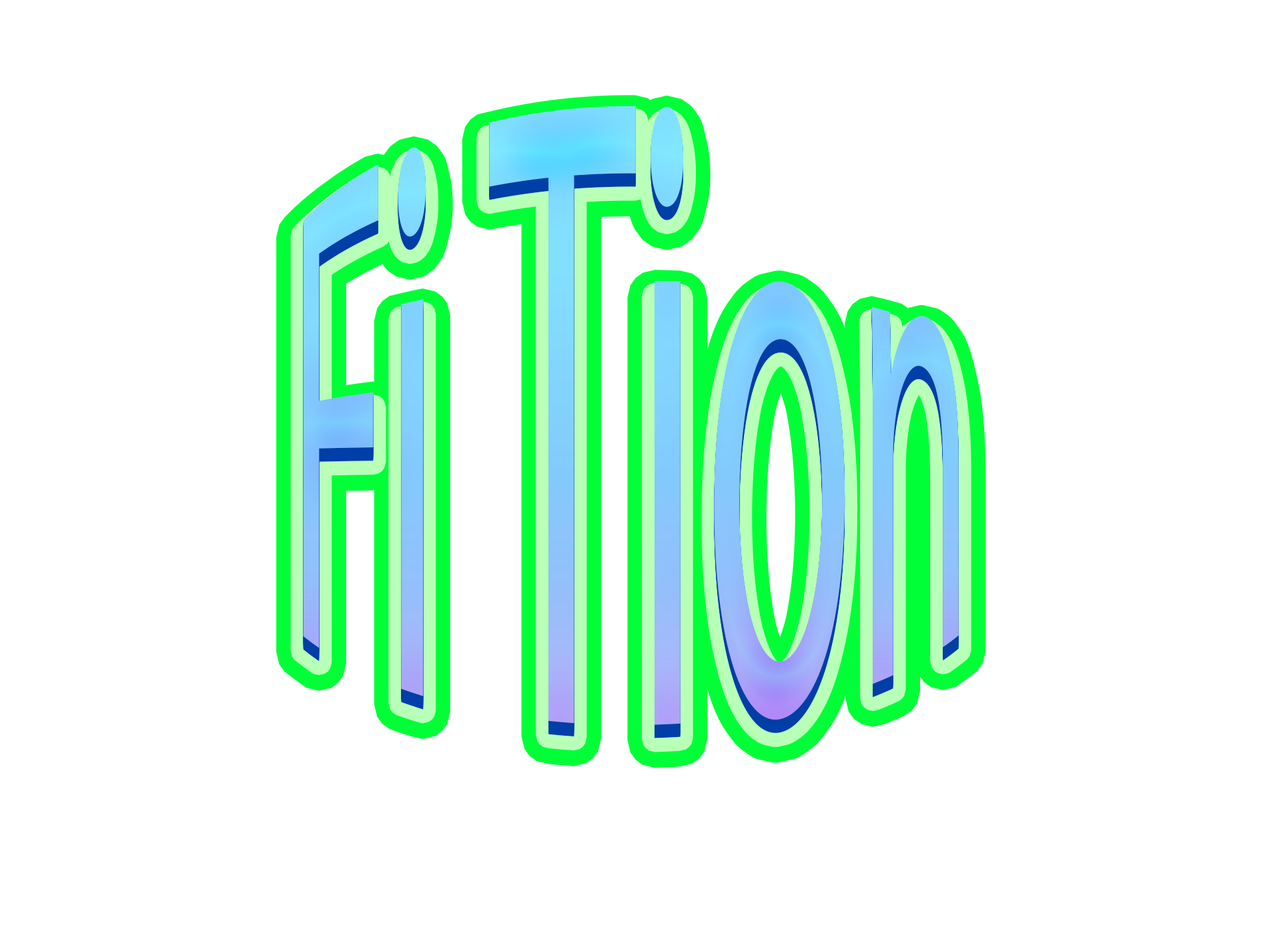
<style>
.page{position:relative;width:1261px;height:946px;background:#ffffff}
.page>*{position:absolute;margin:0}
.t1{font:200.2px/164.1px "MyriadPro-Regular"}
</style>
<div class="page">
<p class="t1" style="left:303px;top:113px;width:656px;height:618px;text-align:center">Fi Tion</p>
<p class="t1" style="left:303px;top:111px;width:656px;height:619px;text-align:center">Fi Tion</p>
<p class="t1" style="left:303px;top:110px;width:656px;height:619px;text-align:center">Fi Tion</p>
<p class="t1" style="left:303px;top:109px;width:656px;height:618px;text-align:center">Fi Tion</p>
<p class="t1" style="left:303px;top:107px;width:656px;height:619px;text-align:center">Fi Tion</p>
<p class="t1" style="left:303px;top:106px;width:656px;height:619px;text-align:center">Fi Tion</p>
<p class="t1" style="left:303px;top:122px;width:656px;height:619px;text-align:center">Fi Tion</p>
<p class="t1" style="left:303px;top:121px;width:656px;height:618px;text-align:center">Fi Tion</p>
<p class="t1" style="left:303px;top:119px;width:656px;height:619px;text-align:center">Fi Tion</p>
<p class="t1" style="left:303px;top:118px;width:656px;height:619px;text-align:center">Fi Tion</p>
<p class="t1" style="left:303px;top:117px;width:656px;height:618px;text-align:center">Fi Tion</p>
<p class="t1" style="left:303px;top:115px;width:656px;height:619px;text-align:center">Fi Tion</p>
<p class="t1" style="left:303px;top:114px;width:656px;height:619px;text-align:center">Fi Tion</p>
</div>
